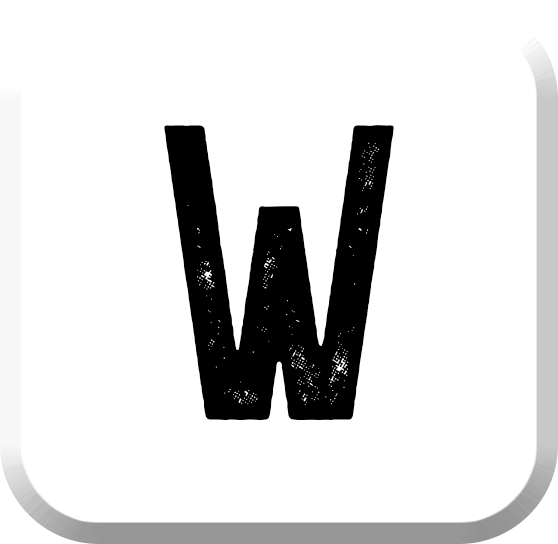
<style>
.page{position:relative;width:558px;height:544px;background:#ffffff}
.page>*{position:absolute;margin:0}
.t1{font:416.7px "GFBricfield-Demo";letter-spacing:0.16em;color:#000000}
</style>
<div class="page">
<p class="t1" style="left:164px;top:125px;width:230px;height:295px">W</p>
</div>
